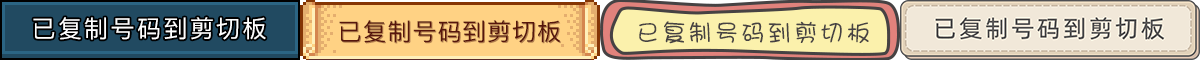
<style>
.page{position:relative;width:1200px;height:60px}
.page>*{position:absolute;margin:0}
.t1{font:24px "PingFang-SC-Medium";letter-spacing:0.1em;color:#ffffff}
.t2{font:24px "PingFang-SC-Medium";letter-spacing:0.04em;color:#56160c}
.t3{font:24px "PingFang-SC-Medium";letter-spacing:0.04em}
.t4{font:24px "DFPShaoNvW5";letter-spacing:0.1em;color:#464243}
</style>
<div class="page">
<p class="t1" style="left:33px;top:17px;width:233px;height:23px">已复制号码到剪切板</p>
<p class="t2" style="left:339px;top:20px;width:221px;height:23px">已复制号码到剪切板</p>
<p class="t3" style="left:340px;top:21px;width:221px;height:23px">已复制号码到剪切板</p>
<p class="t4" style="left:639px;top:21px;width:230px;height:23px">已复制号码到剪切板</p>
</div>
